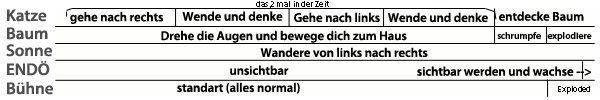
<style>
.page{position:relative;width:600px;height:100px;background:#fefefd}
.page>*{position:absolute;margin:0}
.t1{font:8.5px "MyriadPro-Semibold";color:#000000}
.t2{font:16.9px "MyriadPro-Semibold";color:#4e4e4e}
.t3{font:12.7px "MyriadPro-Semibold";color:#000000}
.t4{font:9.5px "MyriadPro-Semibold";color:#000000}
</style>
<div class="page">
<p class="t1" style="left:256px;top:1px;width:73px;height:7px">das 2 mal in der Zeit</p>
<p class="t2" style="left:7px;top:9px;width:40px;height:13px">Katze</p>
<p class="t3" style="left:70px;top:12px;width:93px;height:12px">gehe nach rechts</p>
<p class="t3" style="left:182px;top:11px;width:101px;height:10px">Wende und denke</p>
<p class="t3" style="left:294px;top:12px;width:194px;height:11px">Gehe nach links   Wende und denke</p>
<p class="t3" style="left:499px;top:11px;width:85px;height:10px">entdecke Baum</p>
<p class="t2" style="left:7px;top:27px;width:41px;height:13px">Baum</p>
<p class="t3" style="left:161px;top:30px;width:246px;height:13px">Drehe die Augen und bewege dich zum Haus</p>
<p class="t4" style="left:497px;top:32px;width:95px;height:9px">schrumpfe   explodiere</p>
<p class="t2" style="left:6px;top:44px;width:46px;height:13px">Sonne</p>
<p class="t3" style="left:260px;top:47px;width:168px;height:11px">Wandere von links nach rechts</p>
<p class="t2" style="left:7px;top:60px;width:43px;height:16px">ENDÖ</p>
<p class="t3" style="left:230px;top:65px;width:59px;height:10px">unsichtbar</p>
<p class="t3" style="left:417px;top:66px;width:174px;height:10px">sichtbar werden und wachse --&gt;</p>
<p class="t2" style="left:7px;top:81px;width:46px;height:14px">Bühne</p>
<p class="t3" style="left:177px;top:82px;width:123px;height:12px">standart (alles normal)</p>
<p class="t1" style="left:558px;top:86px;width:32px;height:8px">Exploded</p>
</div>
